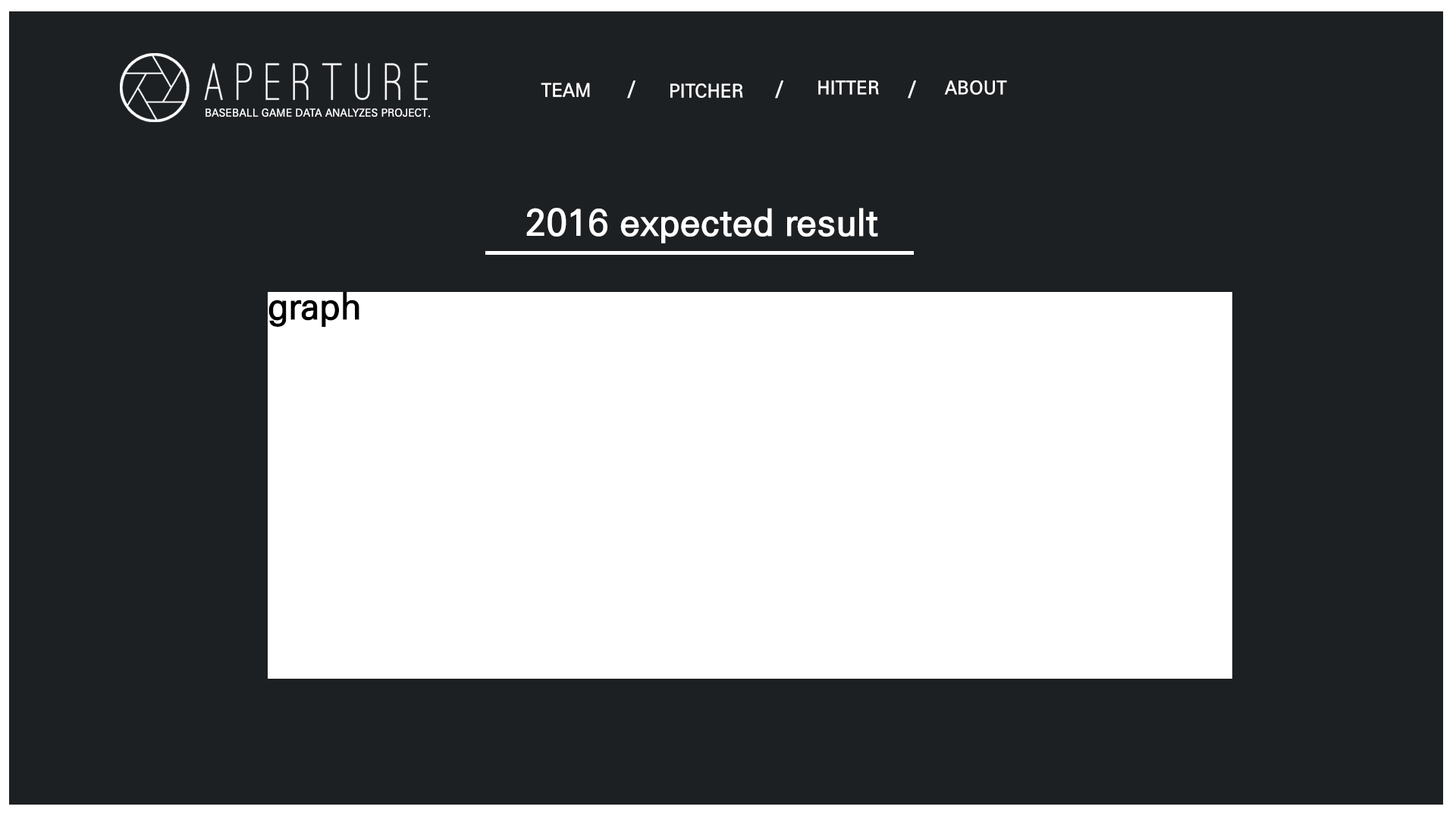
<style>
.page{position:relative;width:1456px;height:819px;background:#1d2023}
.page>*{position:absolute;margin:0}
.t1{font:18.2px "KoPubDotumPB";letter-spacing:0.01em;color:#ffffff}
.t2{font:10.6px "KoPubDotumPB";letter-spacing:0.01em;color:#ffffff}
.t3{font:36.4px "KoPubDotumPB";letter-spacing:0.01em;color:#ffffff}
.t4{font:36.4px "KoPubDotumPB";letter-spacing:0.01em;color:#000000}
</style>
<div class="page">
<p class="t1" style="left:541px;top:83px;width:49px;height:14px">TEAM</p>
<p class="t1" style="left:627px;top:80px;width:8px;height:19px">/</p>
<p class="t1" style="left:670px;top:83px;width:73px;height:15px">PITCHER</p>
<p class="t1" style="left:775px;top:80px;width:8px;height:19px">/</p>
<p class="t1" style="left:818px;top:80px;width:61px;height:15px">HITTER</p>
<p class="t1" style="left:908px;top:80px;width:8px;height:19px">/</p>
<p class="t1" style="left:944px;top:80px;width:63px;height:15px">ABOUT</p>
<p class="t2" style="left:206px;top:108px;width:224px;height:10px">BASEBALL GAME DATA ANALYZES PROJECT.</p>
<p class="t3" style="left:526px;top:208px;width:352px;height:35px">2016 expected result</p>
<p class="t4" style="left:268px;top:292px;width:91px;height:35px">graph</p>
</div>
